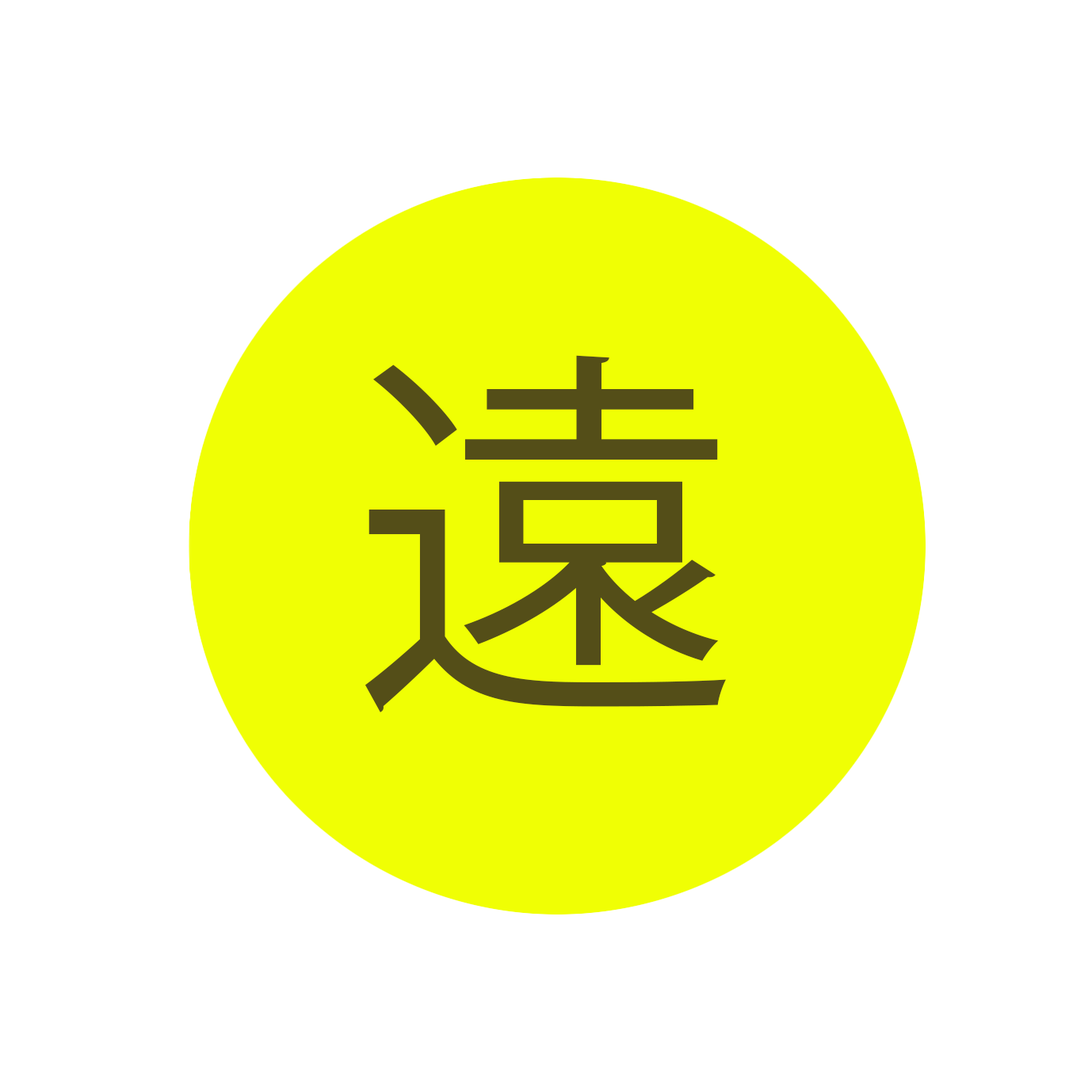
<style>
.page{position:relative;width:1092px;height:1092px;background:#ffffff}
.page>*{position:absolute;margin:0}
.t1{font:385.2px "KozGoPr6N-Regular";color:#544e18}
</style>
<div class="page">
<p class="t1" style="left:365px;top:355px;width:361px;height:357px">遠</p>
</div>
